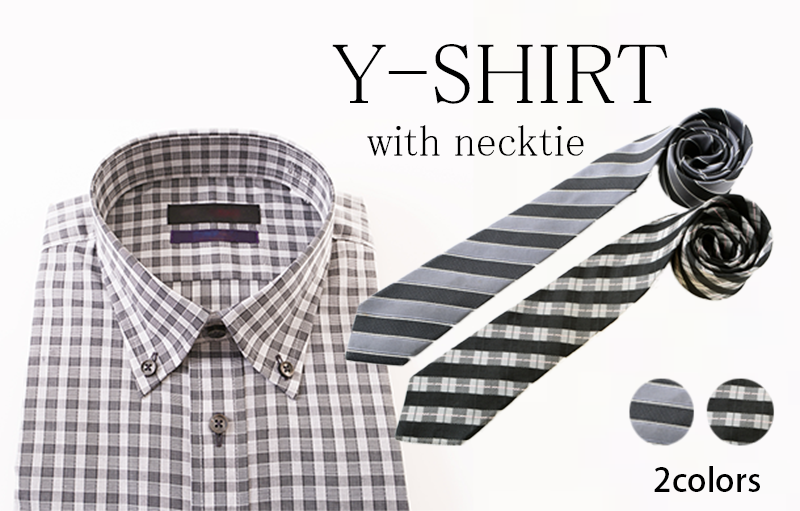
<style>
.page{position:relative;width:800px;height:511px}
.page>*{position:absolute;margin:0}
.t1{font:87.4px "MS-PMincho";color:#000000}
.t2{font:43.7px "MS-PMincho";color:#000000}
.t3{font:32.8px "KozGoPr6N-Medium";color:#000000}
</style>
<div class="page">
<p class="t1" style="left:332px;top:44px;width:336px;height:60px">Y-SHIRT</p>
<p class="t2" style="left:367px;top:125px;width:217px;height:31px">with necktie</p>
<p class="t3" style="left:654px;top:466px;width:106px;height:26px">2colors</p>
</div>
